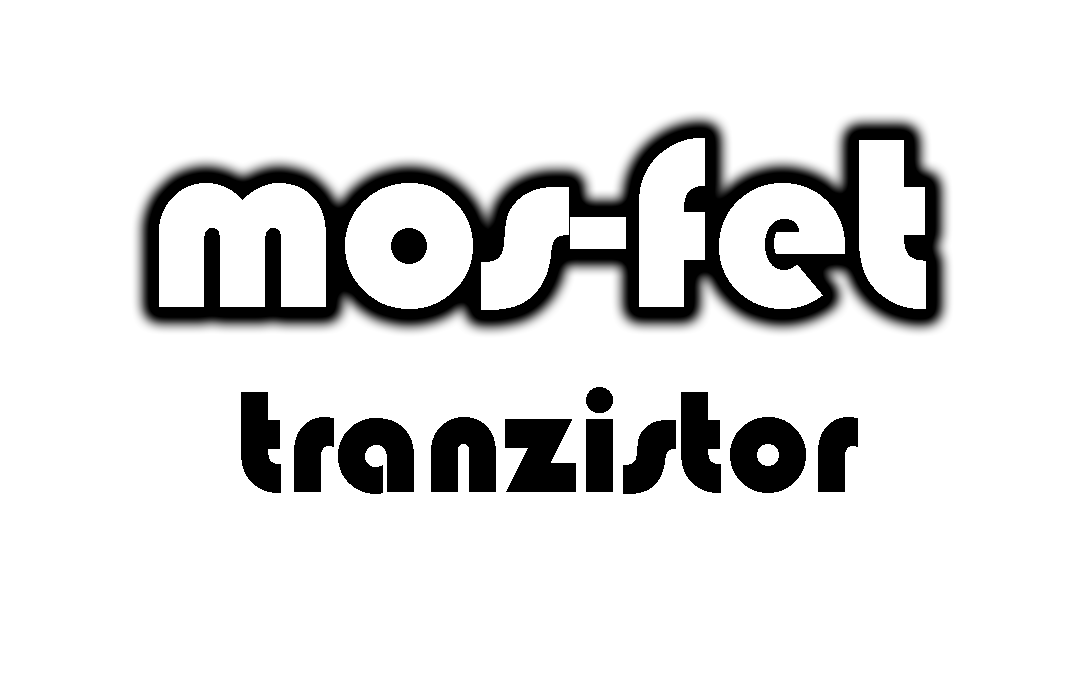
<style>
.page{position:relative;width:1080px;height:680px;background:#ffffff}
.page>*{position:absolute;margin:0}
.t1{font:250px "Bauhaus93";color:#ffffff}
.t2{font:150px "Bauhaus93";color:#000000}
</style>
<div class="page">
<p class="t1" style="left:159px;top:138px;width:767px;height:172px">mos-fet</p>
<p class="t2" style="left:241px;top:387px;width:617px;height:107px">tranzistor</p>
</div>
